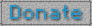
<style>
.page{position:relative;width:92px;height:26px;background:#b6b6b6}
.page>*{position:absolute;margin:0}
.t1{font:16px "Minecraftia";letter-spacing:0.06em;color:#2a96c6}
</style>
<div class="page">
<p class="t1" style="left:10px;top:5px;width:71px;height:14px">Donate</p>
</div>
